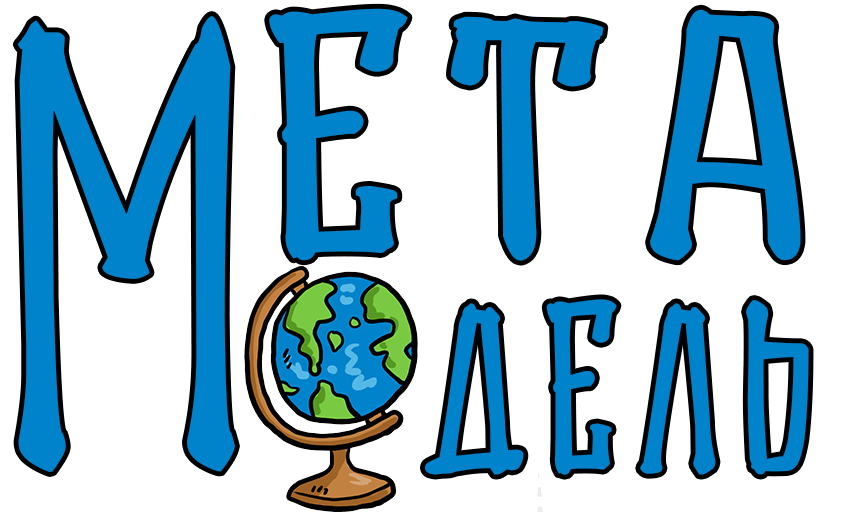
<style>
.page{position:relative;width:841px;height:512px;background:#ffffff}
.page>*{position:absolute;margin:0}
.t1{font:515.3px "Gasrux";color:#0083cb;font-variant:small-caps;scale:0.93 1}
.t2{font:270.9px "Gasrux";letter-spacing:0.1em;color:#0083cb;font-variant:small-caps;font-weight:bold;scale:1.27 1}
.t3{font:270.9px "Gasrux";letter-spacing:0.14em;color:#0083cb;font-variant:small-caps;font-weight:bold;scale:0.91 1}
</style>
<div class="page">
<p class="t1" style="left:17px;top:16px;width:218px;height:456px">M</p>
<p class="t2" style="left:269px;top:8px;width:532px;height:253px">ЕТА</p>
<p class="t3" style="left:425px;top:299px;width:384px;height:176px">дель</p>
</div>
